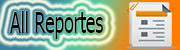
<style>
.page{position:relative;width:180px;height:50px}
.page>*{position:absolute;margin:0}
.t1{font:28.9px "Tahoma";color:#000000;scale:0.61 1}
</style>
<div class="page">
<p class="t1" style="left:10px;top:11px;width:93px;height:28px">All Reportes</p>
</div>
